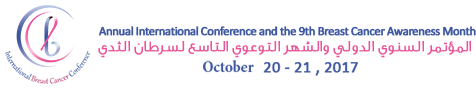
<style>
.page{position:relative;width:476px;height:90px;background:#ffffff}
.page>*{position:absolute;margin:0}
.t1{font:12.6px "Calibri";letter-spacing:-0.05em;color:#40589f;font-weight:bold}
.t2{font:15.3px "GESSTextUltraLight-UltraLight";color:#e95398;font-weight:bold}
.t3{font:16.2px "Calibri";color:#40589f;font-weight:bold}
.t4{font:16.2px "GESSTextUltraLight-UltraLight";color:#40589f;font-weight:bold}
</style>
<div class="page">
<p class="t1" style="left:98px;top:26px;width:378px;height:10px">Annual International Conference and the 9th Breast Cancer Awareness Month</p>
<p class="t2" style="left:98px;top:41px;width:373px;height:17px">المؤتمر السنوي الدولي والشهر التوعوي التاسع لسرطان الثدي</p>
<p class="t3" style="left:203px;top:60px;width:155px;height:16px"><span class="t4">October   </span>20 - 21 , 2017</p>
</div>
